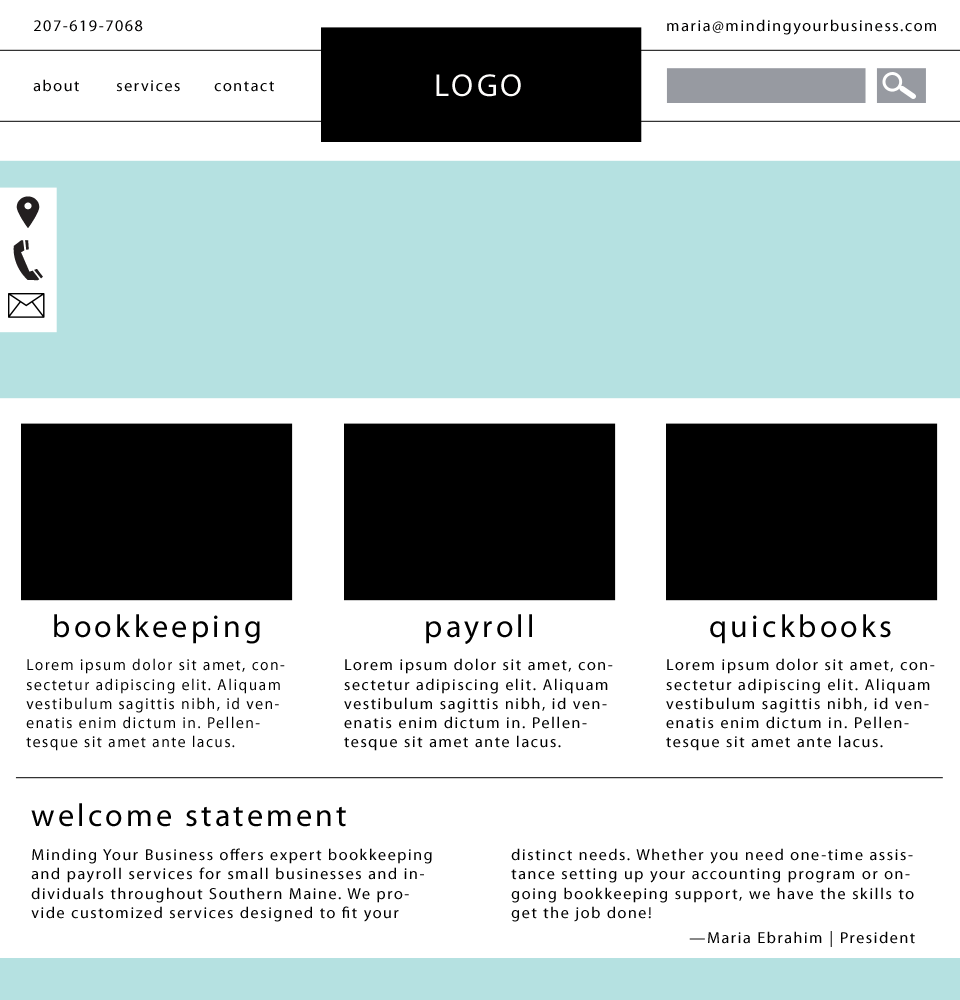
<style>
.page{position:relative;width:960px;height:1000px;background:#ffffff}
.page>*{position:absolute;margin:0}
.t1{font:16px "MyriadPro-Regular";letter-spacing:0.1em;color:#010000}
.t2{font:32px "MyriadPro-Regular";letter-spacing:0.1em;color:#fefdfc}
.t3{font:16px "MyriadPro-Regular";letter-spacing:0.1em;color:#000000}
.t4{font:32px "MyriadPro-Regular";letter-spacing:0.1em;color:#000000}
.t5{font:16px "MyriadPro-Regular";letter-spacing:0.1em;color:#000000;scale:0.96 1}
</style>
<div class="page">
<p class="t1" style="left:34px;top:20px;width:109px;height:12px">207-619-7068</p>
<p class="t1" style="left:667px;top:19px;width:269px;height:16px">maria@mindingyourbusiness.com</p>
<p class="t2" style="left:436px;top:74px;width:85px;height:23px">LOGO</p>
<p class="t1" style="left:33px;top:79px;width:46px;height:13px">about</p>
<p class="t3" style="left:116px;top:80px;width:64px;height:12px">services</p>
<p class="t3" style="left:214px;top:81px;width:60px;height:11px">contact</p>
<p class="t4" style="left:54px;top:614px;width:206px;height:30px">bookkeeping</p>
<p class="t4" style="left:426px;top:614px;width:106px;height:30px">payroll</p>
<p class="t4" style="left:710px;top:614px;width:181px;height:30px">quickbooks</p>
<p class="t5" style="left:26px;top:658px;width:259px;height:93px">Lorem ipsum dolor sit amet, consectetur adipiscing elit. Aliquam vestibulum sagittis nibh, id venenatis enim dictum in. Pellentesque sit amet ante lacus.</p>
<p class="t3" style="left:344px;top:658px;width:269px;height:93px">Lorem ipsum dolor sit amet, consectetur adipiscing elit. Aliquam vestibulum sagittis nibh, id venenatis enim dictum in. Pellentesque sit amet ante lacus.</p>
<p class="t3" style="left:666px;top:658px;width:269px;height:93px">Lorem ipsum dolor sit amet, consectetur adipiscing elit. Aliquam vestibulum sagittis nibh, id venenatis enim dictum in. Pellentesque sit amet ante lacus.</p>
<p class="t4" style="left:31px;top:803px;width:315px;height:24px">welcome statement</p>
<p class="t3" style="left:31px;top:848px;width:401px;height:74px">Minding Your Business offers expert bookkeeping and payroll services for small businesses and individuals throughout Southern Maine. We provide customized services designed to fit your</p>
<p class="t3" style="left:511px;top:848px;width:403px;height:74px">distinct needs. Whether you need one-time assistance setting up your accounting program or ongoing bookkeeping support, we have the skills to get the job done!</p>
<p class="t3" style="left:689px;top:931px;width:226px;height:16px">—Maria Ebrahim | President</p>
</div>
